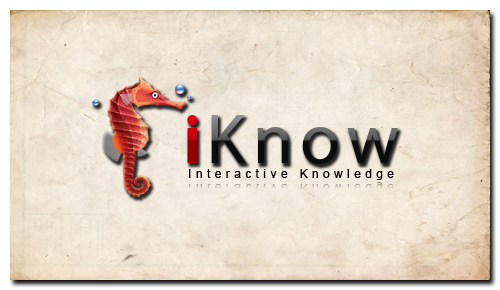
<style>
.page{position:relative;width:500px;height:290px}
.page>*{position:absolute;margin:0}
.t1{font:71.9px "MyriadPro-BoldCond";letter-spacing:0.1em}
.t2{font:71.9px "MyriadPro-Regular";letter-spacing:0.1em}
.t3{font:11.5px "ArialMT";letter-spacing:0.4em;color:#000000}
.t4{font:11.5px "ArialMT";letter-spacing:0.4em}
</style>
<div class="page">
<p class="t1" style="left:187px;top:115px;width:10px;height:48px">i</p>
<p class="t2" style="left:211px;top:115px;width:187px;height:49px">Know</p>
<p class="t3" style="left:189px;top:169px;width:205px;height:11px">Interactive Knowledge</p>
<p class="t4" style="left:189px;top:182px;width:205px;height:11px">Interactive Knowledge</p>
</div>
